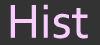
<style>
.page{position:relative;width:100px;height:45px;background:#333333}
.page>*{position:absolute;margin:0}
.t1{font:50px "Corbel";color:#f8ccff}
</style>
<div class="page">
<p class="t1" style="left:10px;top:4px;width:78px;height:35px">Hist</p>
</div>
